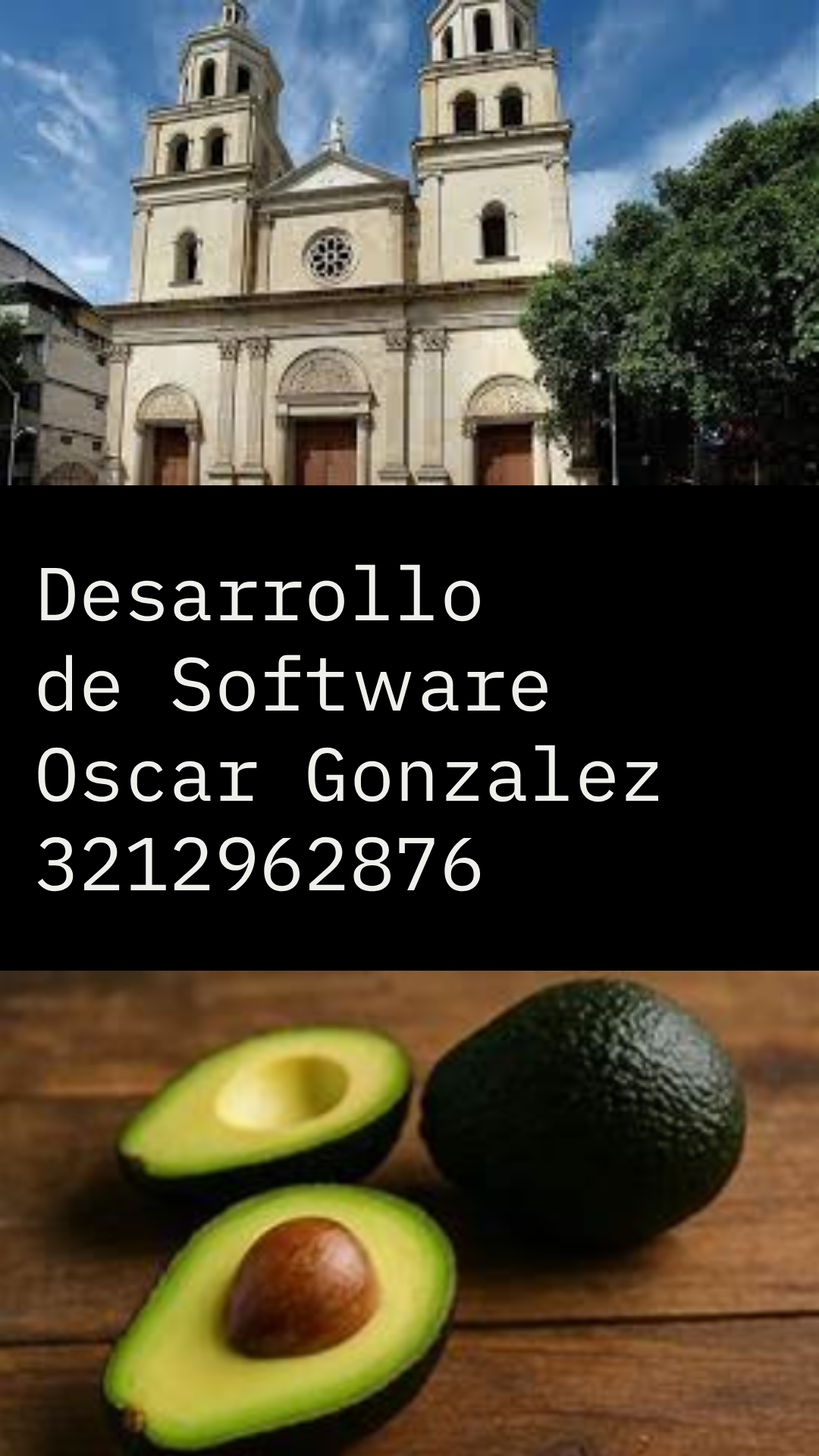
<style>
.page{position:relative;width:819px;height:1456px;background:#000000}
.page>*{position:absolute;margin:0}
.t1{font:75.1px "iAWriterDuospace-Regular";color:#eff0eb}
</style>
<div class="page">
<p class="t1" style="left:37px;top:564px;width:621px;height:328px">Desarrollo<br>de Software<br>Oscar Gonzalez<br>3212962876</p>
</div>
